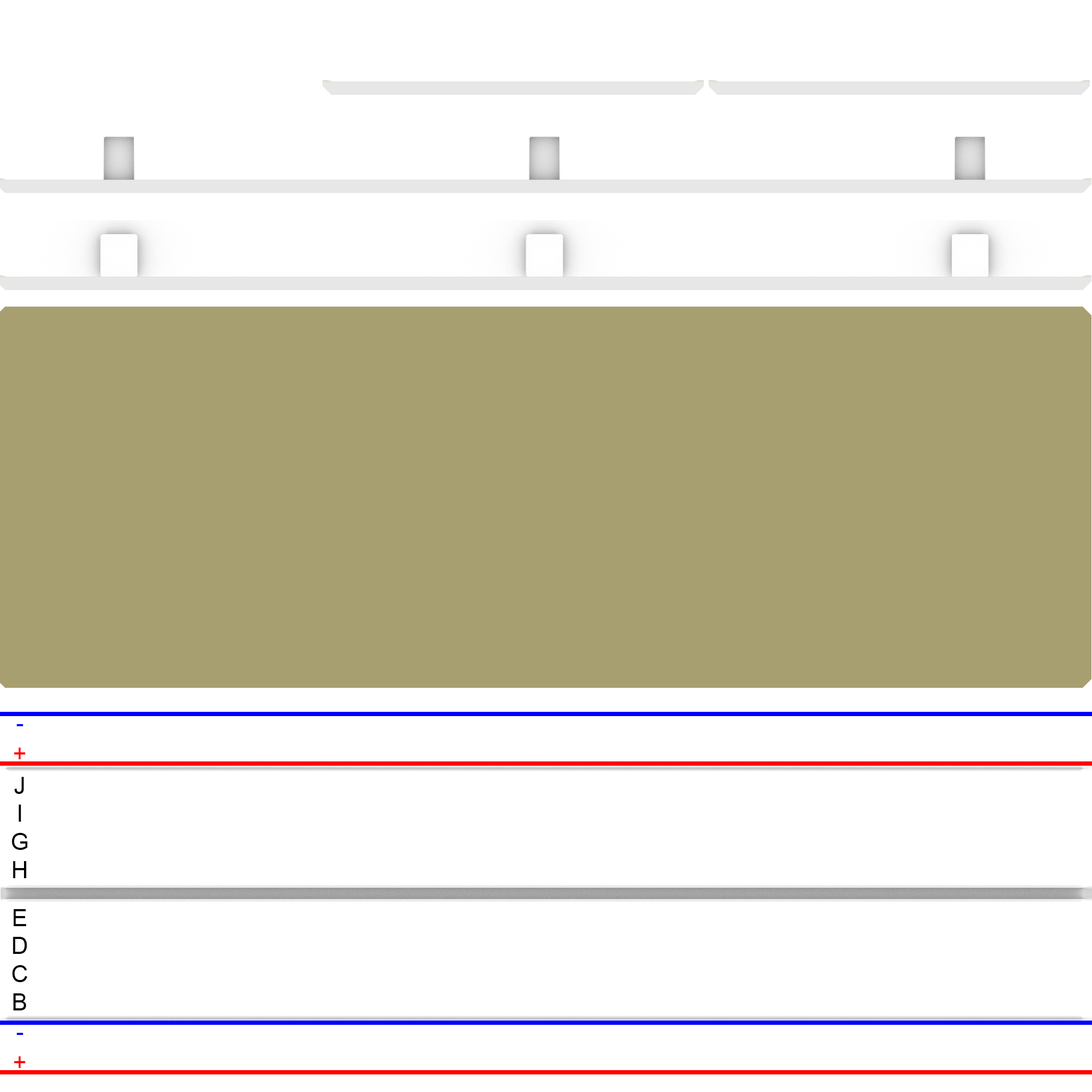
<style>
.page{position:relative;width:1092px;height:1092px;background:#ffffff}
.page>*{position:absolute;margin:0}
.t1{font:23.5px/30.6px "ArialMT";color:#0000ff}
.t2{font:23.5px/30.6px "ArialMT";color:#ff0000}
.t3{font:23.5px "ArialMT";color:#000000}
</style>
<div class="page">
<p class="t1" style="left:14px;top:724px;width:12px;height:35px;text-align:center">-<br><span class="t2">+</span></p>
<p class="t3" style="left:12px;top:777px;width:16px;height:101px;text-align:center">J<br>I<br>G<br>H</p>
<p class="t3" style="left:12px;top:909px;width:15px;height:101px;text-align:center">E<br>D<br>C<br>B</p>
<p class="t1" style="left:14px;top:1033px;width:12px;height:35px;text-align:center">-<br><span class="t2">+</span></p>
</div>
